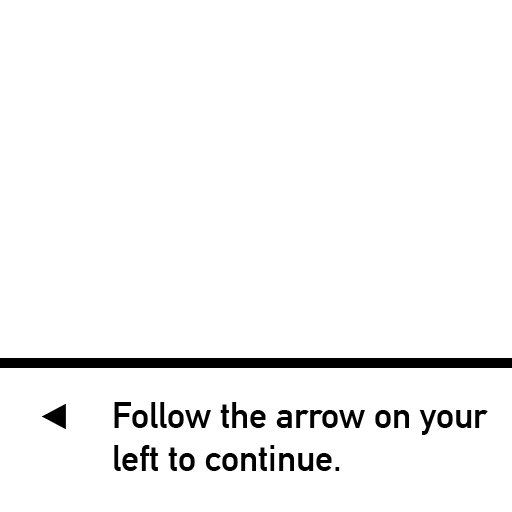
<style>
.page{position:relative;width:512px;height:512px;background:#ffffff}
.page>*{position:absolute;margin:0}
.t1{font:60px "ArialUnicodeMS";color:#000000}
.t2{font:36px "DINAlternate-Bold";color:#000000}
</style>
<div class="page">
<p class="t1" style="left:41px;top:403px;width:25px;height:27px">◀</p>
<p class="t2" style="left:114px;top:402px;width:374px;height:69px">Follow the arrow on your <br>        left to continue.</p>
</div>
